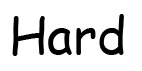
<style>
.page{position:relative;width:142px;height:71px;background:#ffffff}
.page>*{position:absolute;margin:0}
.t1{font:50px "ComicSansMS";color:#000000}
</style>
<div class="page">
<p class="t1" style="left:12px;top:14px;width:112px;height:42px">Hard</p>
</div>
